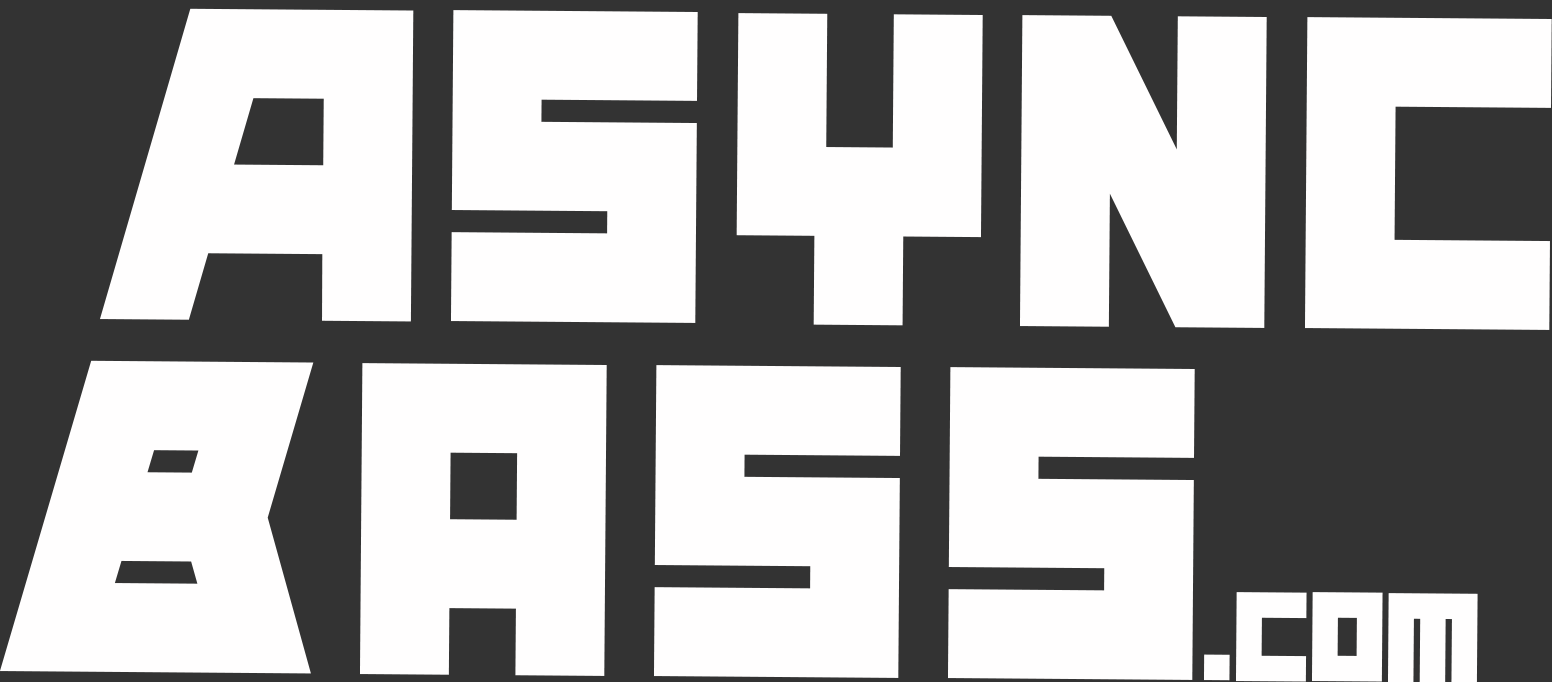
<style>
.page{position:relative;width:1552px;height:682px;background:#fffefe}
.page>*{position:absolute;margin:0}
.t1{font:454.8px "AnimalSilence";letter-spacing:0.04em;color:#fffefe}
.t2{font:454.8px "AnimalSilence";letter-spacing:0.06em;color:#fffefe}
.t3{font:130px "AnimalSilence";color:#fffefe}
</style>
<div class="page">
<p class="t1" style="left:100px;top:8px;width:1452px;height:322px">Async</p>
<p class="t2" style="left:0px;top:360px;width:1195px;height:320px">Bass</p>
<p class="t3" style="left:1204px;top:592px;width:274px;height:91px">.com</p>
</div>
